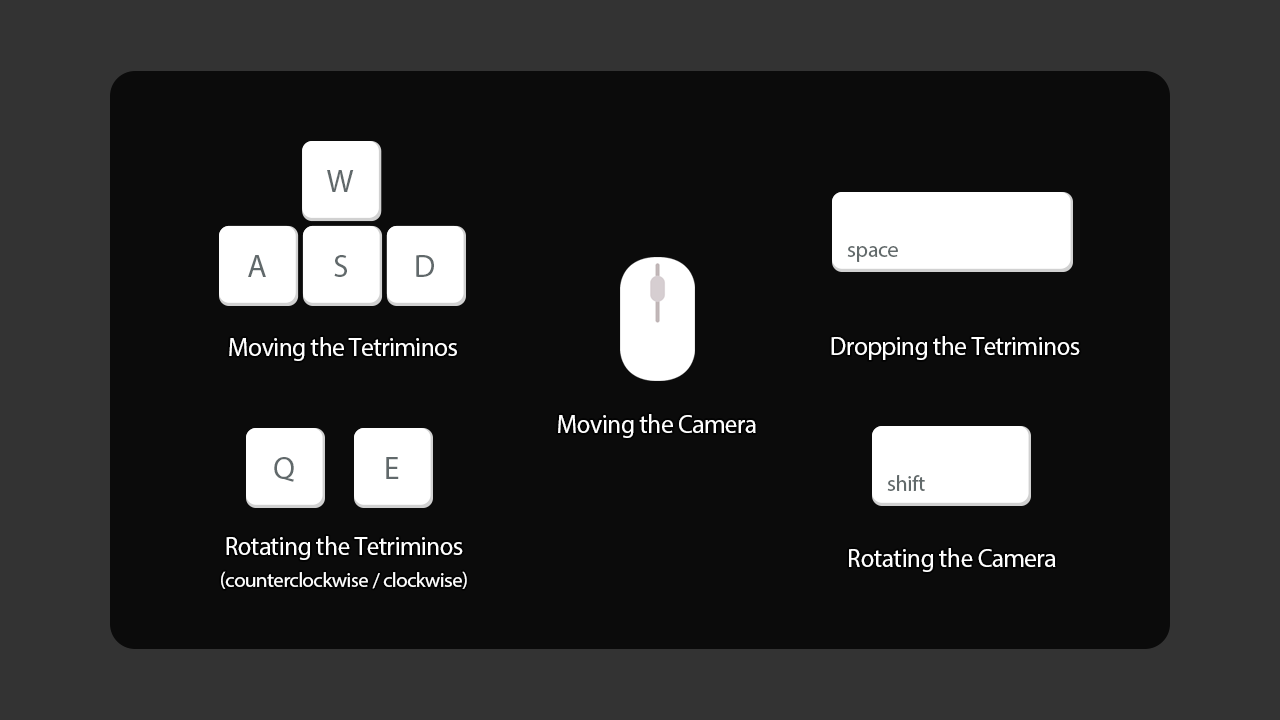
<style>
.page{position:relative;width:1280px;height:720px;background:#0b0b0b}
.page>*{position:absolute;margin:0}
.t1{font:32px "MyriadPro-Regular";letter-spacing:-0.025em;color:#61696b}
.t2{font:22.4px "MyriadPro-Regular";letter-spacing:-0.025em;color:#626a6b}
.t3{font:25.7px "MyriadPro-Regular";letter-spacing:-0.025em;color:#ffffff}
.t4{font:20.8px "MyriadPro-Regular";letter-spacing:-0.025em;color:#ffffff}
</style>
<div class="page">
<p class="t1" style="left:327px;top:170px;width:27px;height:22px">W</p>
<p class="t2" style="left:847px;top:246px;width:51px;height:16px">space</p>
<p class="t1" style="left:248px;top:255px;width:18px;height:22px">A</p>
<p class="t1" style="left:334px;top:255px;width:13px;height:22px">S</p>
<p class="t1" style="left:416px;top:255px;width:18px;height:22px">D</p>
<p class="t3" style="left:229px;top:337px;width:228px;height:24px">Moving the Tetriminos</p>
<p class="t3" style="left:831px;top:336px;width:249px;height:24px">Dropping the Tetriminos</p>
<p class="t3" style="left:558px;top:414px;width:198px;height:24px">Moving the Camera</p>
<p class="t1" style="left:274px;top:457px;width:20px;height:25px">Q</p>
<p class="t1" style="left:386px;top:457px;width:13px;height:22px">E</p>
<p class="t2" style="left:887px;top:475px;width:38px;height:16px">shift</p>
<p class="t3" style="left:226px;top:536px;width:237px;height:24px">Rotating the Tetriminos</p>
<p class="t3" style="left:849px;top:548px;width:207px;height:24px">Rotating the Camera</p>
<p class="t4" style="left:221px;top:571px;width:246px;height:18px">(counterclockwise / clockwise)</p>
</div>
